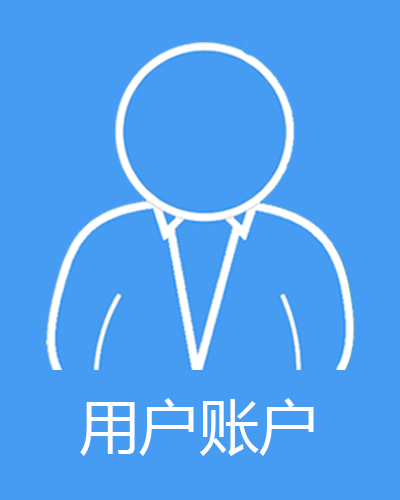
<style>
.page{position:relative;width:400px;height:500px;background:#469cf2}
.page>*{position:absolute;margin:0}
.t1{font:60px "MicrosoftYaHei";color:#ffffff}
</style>
<div class="page">
<p class="t1" style="left:80px;top:398px;width:234px;height:58px">用户账户</p>
</div>
